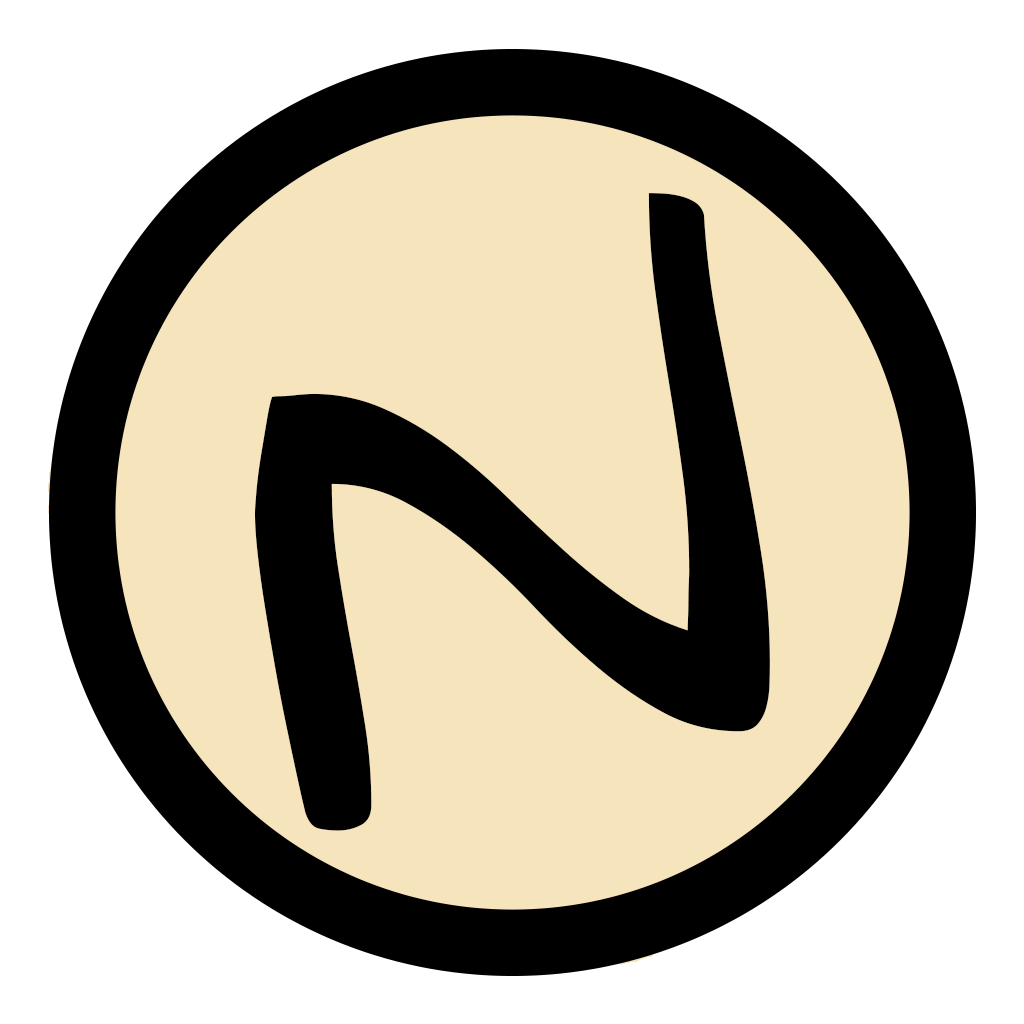
<style>
.page{position:relative;width:1024px;height:1024px;background:#f5e4bc}
.page>*{position:absolute;margin:0}
.t1{font:794px "GloriaHallelujah";letter-spacing:-0.06em;color:#000000}
</style>
<div class="page">
<p class="t1" style="left:255px;top:193px;width:515px;height:638px">N</p>
</div>
